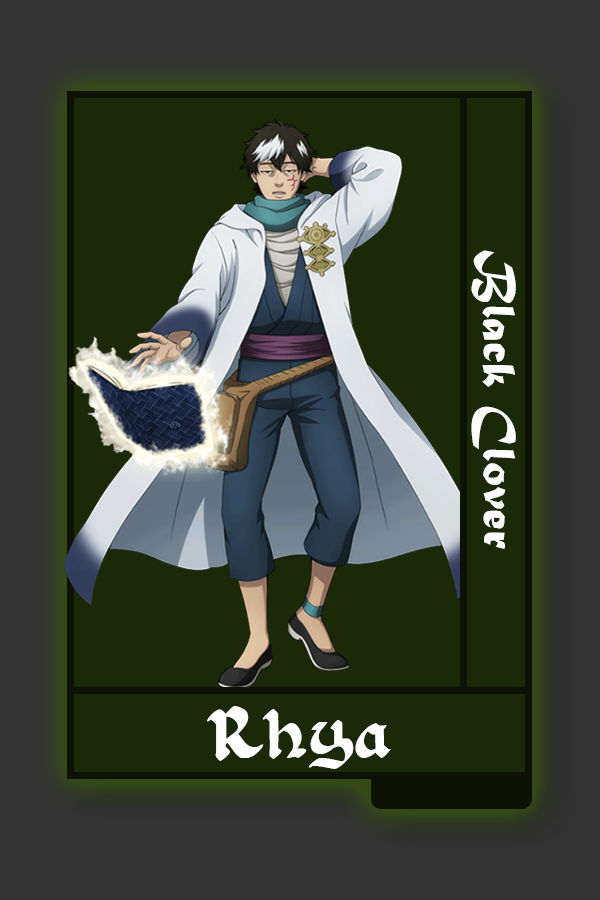
<style>
.page{position:relative;width:600px;height:900px;background:#1b2908}
.page>*{position:absolute;margin:0}
.t1{font:48.8px "MaturaMTScriptCapitals";color:#ffffff}
.t2{font:59.7px "FloranteatLaura";color:#ffffff}
</style>
<div class="page">
<p class="t1" style="left:471px;top:250px;width:45px;height:299px;rotate:90deg">Black Clover</p>
<p class="t2" style="left:207px;top:706px;width:184px;height:63px">Rhya</p>
</div>
